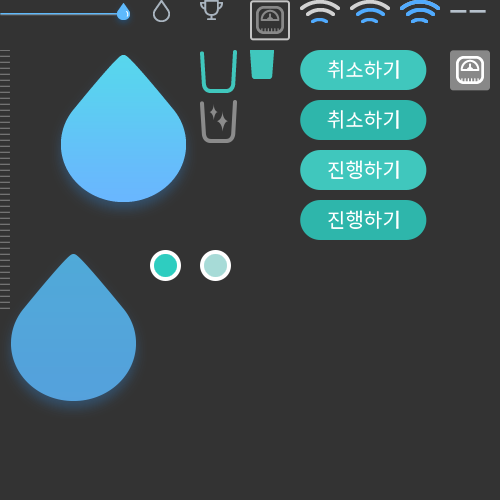
<style>
.page{position:relative;width:500px;height:500px;background:#333333}
.page>*{position:absolute;margin:0}
.t1{font:20px "NotoSansCJKkr-Regular";color:#ffffff}
</style>
<div class="page">
<p class="t1" style="left:328px;top:160px;width:71px;height:19px">진행하기</p>
<p class="t1" style="left:328px;top:210px;width:71px;height:19px">진행하기</p>
</div>
